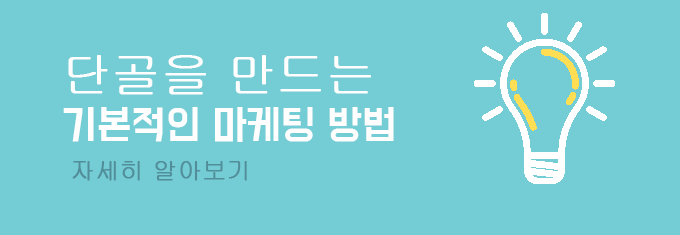
<style>
.page{position:relative;width:680px;height:235px;background:#74cdd5}
.page>*{position:absolute;margin:0}
.t1{font:36px "BMDoHyeon";color:#fffefe}
.t2{font:48px "Gulim";color:#fffefe;font-weight:bold}
.t3{font:24px "Gulim";color:#518e99;font-weight:bold}
</style>
<div class="page">
<p class="t1" style="left:63px;top:55px;width:331px;height:87px"><span class="t2">단골을 만드는</span> <br>기본적인 마케팅 방법</p>
<p class="t3" style="left:72px;top:161px;width:175px;height:20px">자세히 알아보기</p>
</div>
